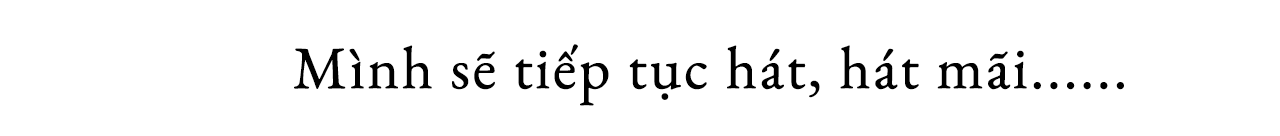
<style>
.page{position:relative;width:1280px;height:136px;background:#ffffff}
.page>*{position:absolute;margin:0}
.t1{font:60px "EBGaramond-Regular";letter-spacing:0.02em;color:#000000;font-weight:bold}
</style>
<div class="page">
<p class="t1" style="left:294px;top:44px;width:830px;height:62px">Mình sẽ tiếp tục hát, hát mãi......</p>
</div>
